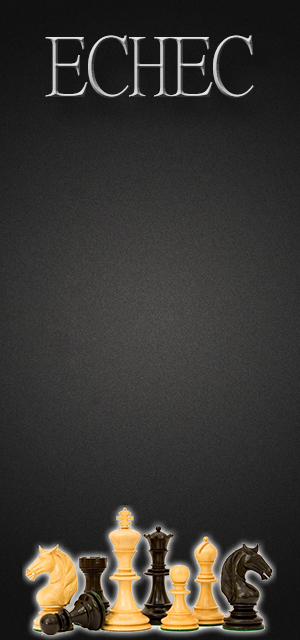
<style>
.page{position:relative;width:300px;height:640px}
.page>*{position:absolute;margin:0}
.t1{font:83.3px "Ming-Lt-HKSCS-ExtB"}
</style>
<div class="page">
<p class="t1" style="left:45px;top:35px;width:209px;height:64px">ECHEC</p>
</div>
